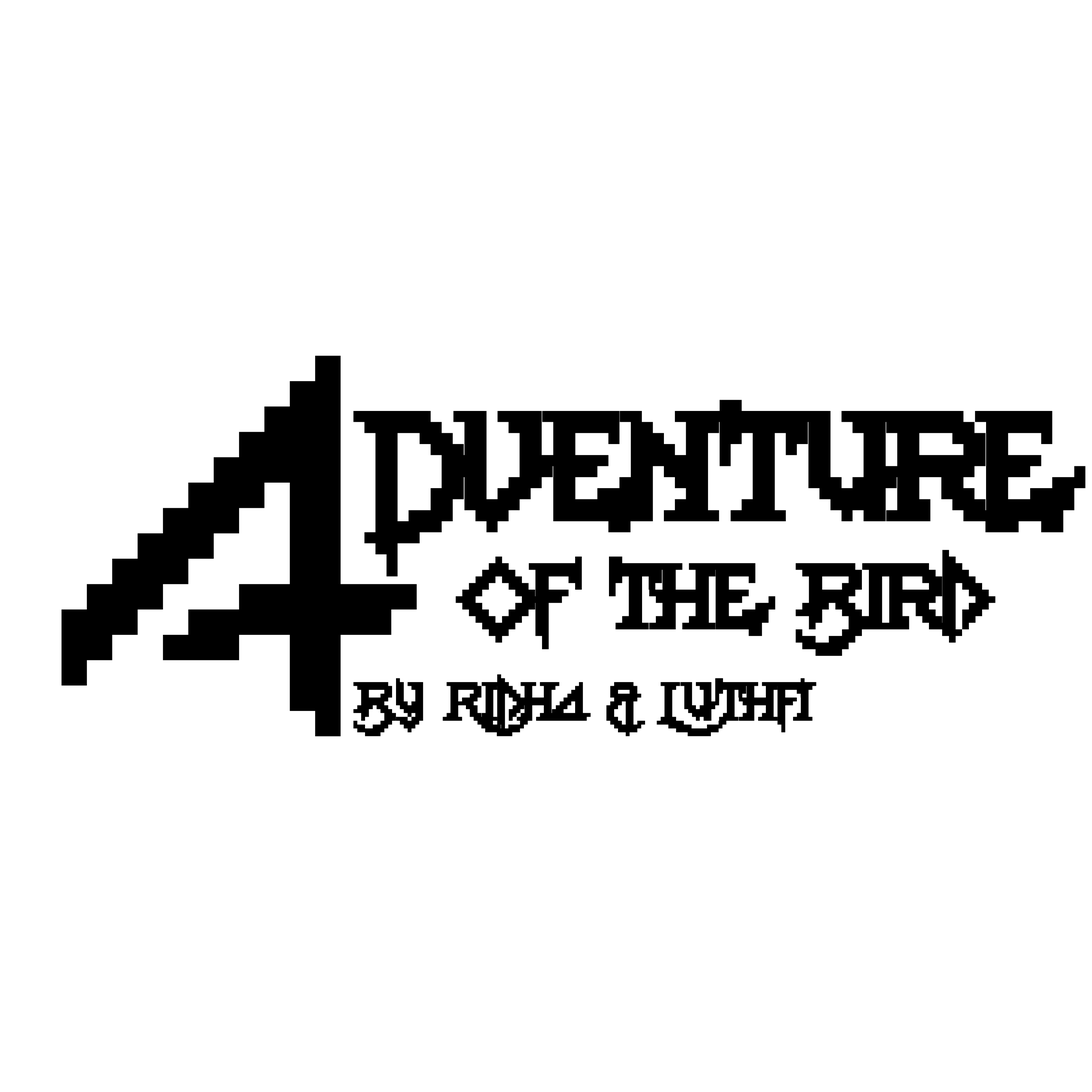
<style>
.page{position:relative;width:1092px;height:1092px;background:#ffffff}
.page>*{position:absolute;margin:0}
.t1{font:279.1px "Lady-Radical-2";letter-spacing:0.005em;color:#000000}
.t2{font:121.3px "Lady-Radical-2";letter-spacing:0.005em;color:#000000}
.t3{font:72.8px "Lady-Radical-2";letter-spacing:0.005em;color:#000000}
.t4{font:42.5px "Lady-Radical-2";letter-spacing:0.005em;color:#000000}
</style>
<div class="page">
<p class="t1" style="left:62px;top:356px;width:355px;height:380px">A</p>
<p class="t2" style="left:353px;top:400px;width:732px;height:177px">Dventure</p>
<p class="t3" style="left:456px;top:550px;width:540px;height:106px">Of the Bird</p>
<p class="t4" style="left:353px;top:674px;width:463px;height:62px">By Ridha &amp; Luthfi</p>
</div>
